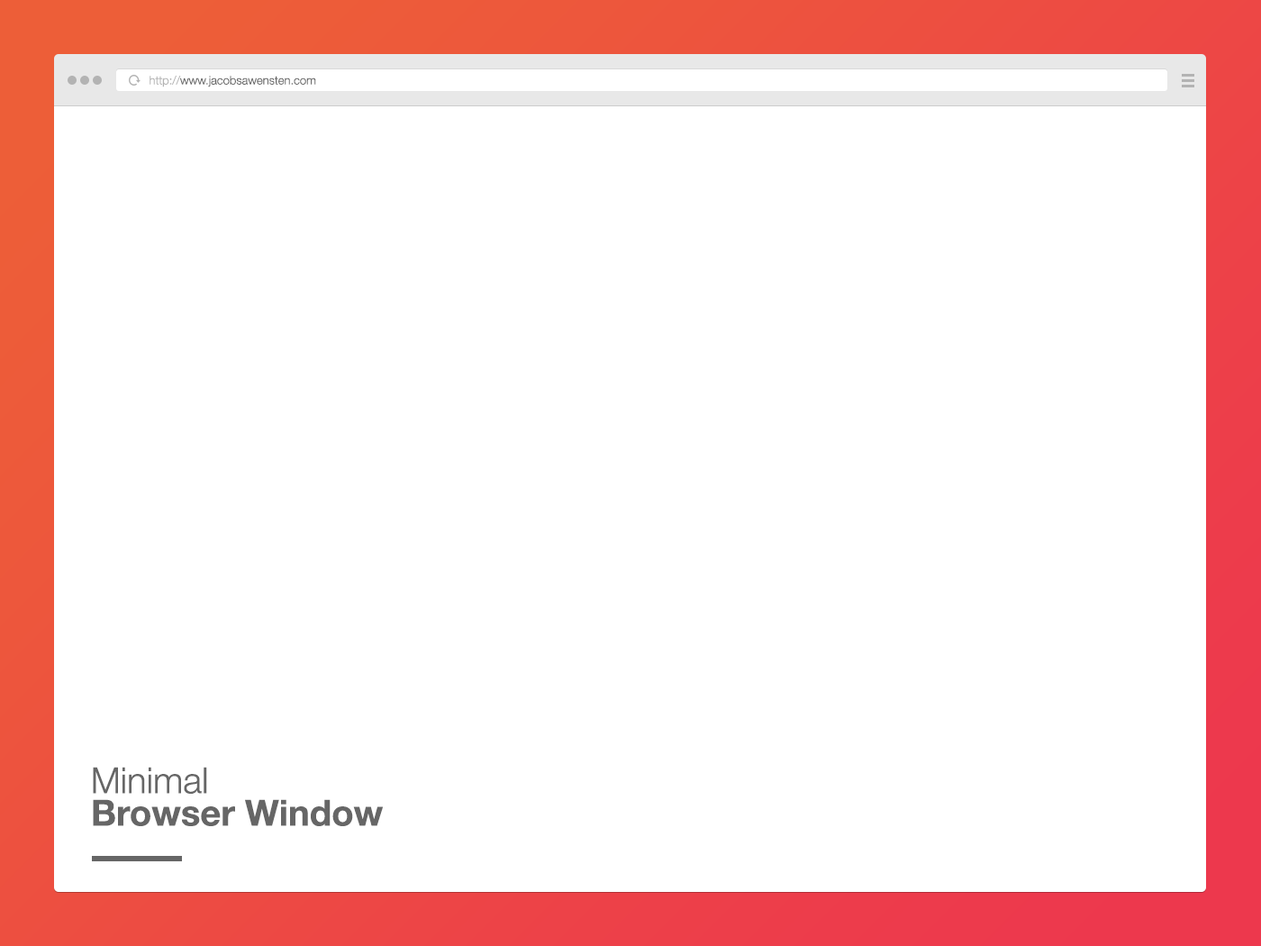
<style>
.page{position:relative;width:1261px;height:946px;background:#ffffff}
.page>*{position:absolute;margin:0}
.t1{font:11.7px "HelveticaNeue-Light";color:#666666}
.t2{font:11.7px "HelveticaNeue-Light";color:#b3b3b3}
.t3{font:36px/32.4px "HelveticaNeue-Bold";color:#666666}
.t4{font:36px/32.4px "HelveticaNeue-Light";color:#666666}
</style>
<div class="page">
<p class="t1" style="left:150px;top:76px;width:166px;height:11px"><span class="t2">http://</span>www.jacobsawensten.com</p>
<p class="t3" style="left:93px;top:766px;width:290px;height:60px"><span class="t4">Minimal<br></span>Browser Window</p>
</div>
